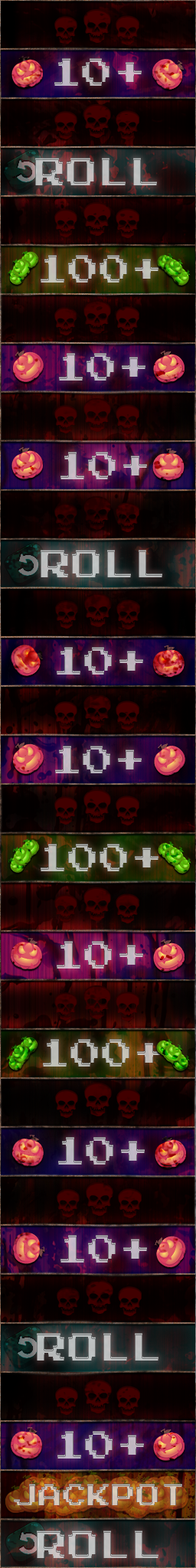
<style>
.page{position:relative;width:196px;height:1568px}
.page>*{position:absolute;margin:0}
.t1{font:31.5px "PressStart2P-Regular";color:#bcb5bf}
.t2{font:31.5px "PressStart2P-Regular";color:#bdbdbd}
.t3{font:31.5px "PressStart2P-Regular";color:#bebcb5}
.t4{font:31.5px "PressStart2P-Regular";color:#bdb5c1}
.t5{font:31.5px "PressStart2P-Regular";color:#bfb7bf}
.t6{font:31.5px "PressStart2P-Regular";color:#bbbebe}
.t7{font:31.5px "PressStart2P-Regular";color:#bcb4bd}
.t8{font:31.5px "PressStart2P-Regular";color:#bbb6be}
.t9{font:31.5px "PressStart2P-Regular";color:#b9bbb5}
.t10{font:31.5px "PressStart2P-Regular";color:#c3b6bf}
.t11{font:31.5px "PressStart2P-Regular";color:#bbbab5}
.t12{font:31.5px "PressStart2P-Regular";color:#bbb5be}
.t13{font:31.5px "PressStart2P-Regular";color:#bfb6c2}
.t14{font:31.5px "PressStart2P-Regular";color:#babdbd}
.t15{font:31.5px "PressStart2P-Regular";color:#beb6c3}
.t16{font:24.5px "PressStart2P-Regular"}
.t17{font:31.5px "PressStart2P-Regular";color:#bebebe}
</style>
<div class="page">
<p class="t1" style="left:54px;top:58px;width:88px;height:28px">10+</p>
<p class="t2" style="left:35px;top:158px;width:122px;height:27px">ROLL</p>
<p class="t3" style="left:41px;top:255px;width:117px;height:28px">100+</p>
<p class="t4" style="left:59px;top:353px;width:86px;height:28px">10+</p>
<p class="t5" style="left:60px;top:452px;width:87px;height:27px">10+</p>
<p class="t6" style="left:41px;top:550px;width:121px;height:27px">ROLL</p>
<p class="t7" style="left:57px;top:647px;width:86px;height:28px">10+</p>
<p class="t8" style="left:55px;top:746px;width:87px;height:27px">10+</p>
<p class="t9" style="left:41px;top:844px;width:117px;height:27px">100+</p>
<p class="t10" style="left:57px;top:941px;width:86px;height:28px">10+</p>
<p class="t11" style="left:43px;top:1039px;width:118px;height:28px">100+</p>
<p class="t12" style="left:58px;top:1137px;width:87px;height:28px">10+</p>
<p class="t13" style="left:60px;top:1235px;width:87px;height:28px">10+</p>
<p class="t14" style="left:37px;top:1333px;width:121px;height:28px">ROLL</p>
<p class="t15" style="left:57px;top:1431px;width:87px;height:28px">10+</p>
<p class="t16" style="left:14px;top:1484px;width:168px;height:21px">JACKPOT</p>
<p class="t17" style="left:37px;top:1530px;width:121px;height:28px">ROLL</p>
</div>
